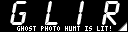
<style>
.page{position:relative;width:128px;height:32px;background:#000000}
.page>*{position:absolute;margin:0}
.t1{font:36px "LcdD";letter-spacing:0.5em;color:#ffffff}
.t2{font:6px "Terminal";color:#ffffff}
</style>
<div class="page">
<p class="t1" style="left:10px;top:0px;width:110px;height:26px">GLIR</p>
<p class="t2" style="left:17px;top:26px;width:94px;height:5px">GHOST PHOTO HUNT IS LIT!</p>
</div>
